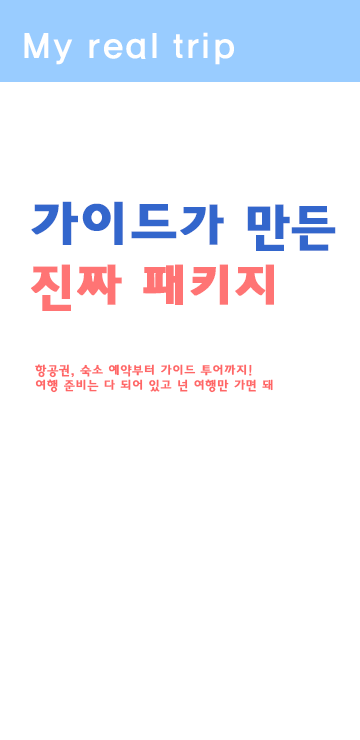
<style>
.page{position:relative;width:360px;height:740px;background:#ffffff}
.page>*{position:absolute;margin:0}
.t1{font:36px "HaanYGodic24";color:#ffffff}
.t2{font:50px "HaanYGodic25";color:#ff7474;font-weight:bold}
.t3{font:53.6px "HaanYGodic25";color:#3366cc;font-weight:bold}
.t4{font:50px "HaanYGodic25";color:#3366cc;font-weight:bold}
.t5{font:12.7px "HaanYGodic23";color:#ff6666;font-weight:bold}
</style>
<div class="page">
<p class="t1" style="left:24px;top:32px;width:210px;height:33px">My real trip</p>
<p class="t2" style="left:31px;top:201px;width:305px;height:110px"><span class="t3">가이드</span><span class="t4">가 만든<br></span>진짜 패키지</p>
<p class="t5" style="left:35px;top:364px;width:238px;height:29px">항공권, 숙소 예약부터 가이드 투어까지!<br>여행 준비는 다 되어 있고 넌 여행만 가면 돼</p>
</div>
